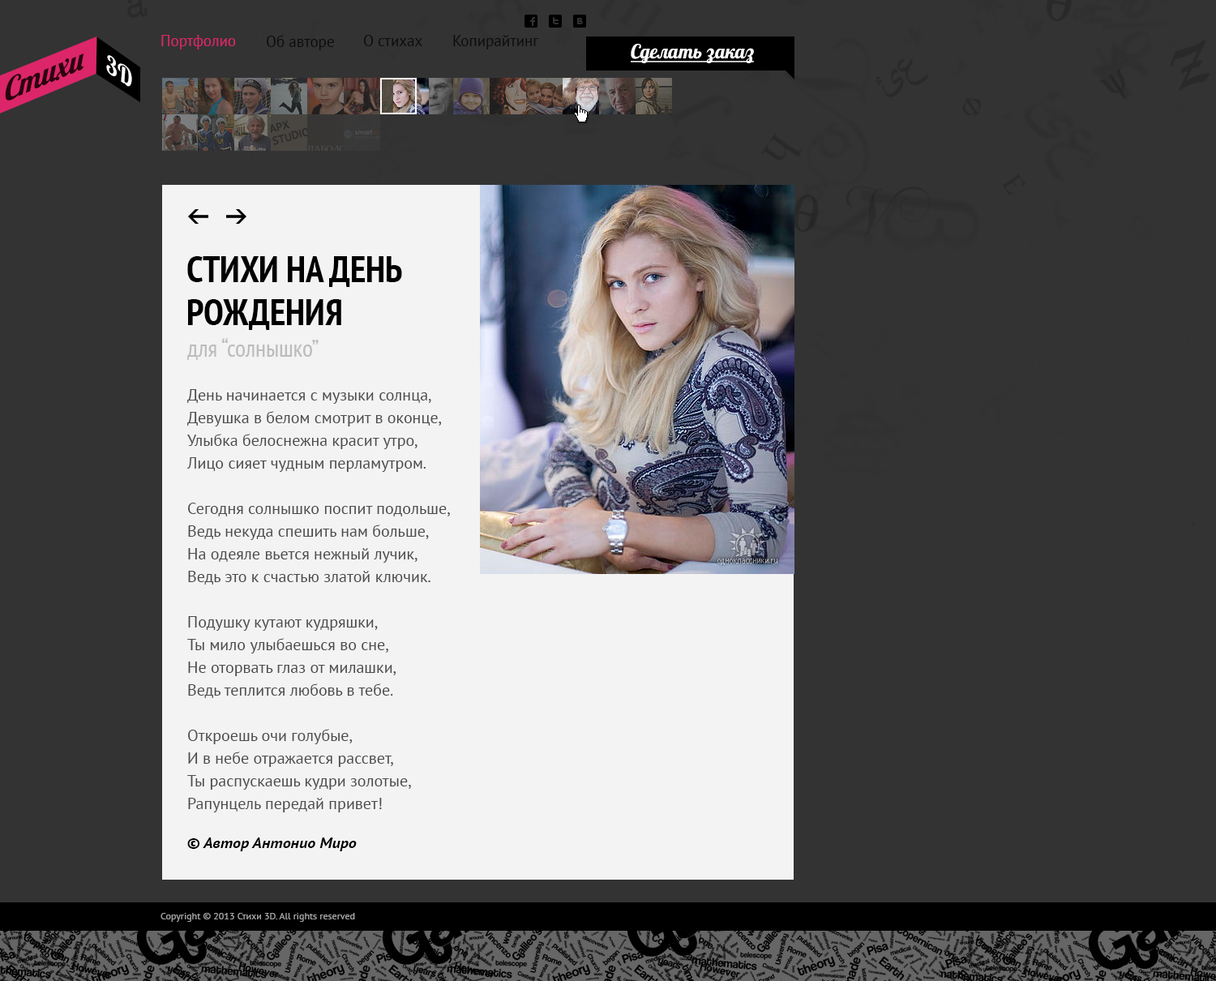
<style>
.page{position:relative;width:1216px;height:981px;background:#333333}
.page>*{position:absolute;margin:0}
.t1{font:15.4px "PTSans-Regular";color:#dc2669}
.t2{font:15.4px "PTSans-Regular";color:#000000}
.t3{font:30.3px "Lobster";color:#2b030f;scale:1.09 1}
.t4{font:19.5px "Lobster";color:#ffffff;text-decoration:underline}
.t5{font:27.1px "Lobster";letter-spacing:0.05em;color:#ffffff;scale:0.94 1}
.t6{font:36.5px/43.6px "PTSans-NarrowBold";color:#000000;text-transform:uppercase}
.t7{font:24.3px "PTSans-Narrow";color:#bcbcbc}
.t8{font:16.2px/22.7px "PTSans-Regular";color:#4c4c4c}
.t9{font:14.6px "PTSans-BoldItalic";color:#000000;scale:1.11 1}
.t10{font:9.7px "PTSans-Regular";color:#a3a3a3}
</style>
<div class="page">
<p class="t1" style="left:161px;top:35px;width:75px;height:14px">Портфолио</p>
<p class="t2" style="left:267px;top:35px;width:67px;height:15px;opacity:0.77">Об авторе</p>
<p class="t2" style="left:364px;top:35px;width:58px;height:11px;opacity:0.77">О стихах</p>
<p class="t2" style="left:453px;top:35px;width:86px;height:14px;opacity:0.77">Копирайтинг</p>
<p class="t3" style="left:5px;top:53px;width:79px;height:48px;rotate:-23deg">Стихи</p>
<p class="t4" style="left:631px;top:44px;width:123px;height:19px">Сделать заказ</p>
<p class="t5" style="left:106px;top:55px;width:26px;height:32px;rotate:33deg">3D</p>
<p class="t6" style="left:187px;top:256px;width:215px;height:74px">стихи на День<br>рождения</p>
<p class="t7" style="left:187px;top:338px;width:132px;height:22px">для “солнышко”</p>
<p class="t8" style="left:187px;top:389px;width:263px;height:423px">День начинается с музыки солнца,<br>Девушка в белом смотрит в оконце,<br>Улыбка белоснежна красит утро,<br>Лицо сияет чудным перламутром.<br><br>Сегодня солнышко поспит подольше,<br>Ведь некуда спешить нам больше,<br>На одеяле вьется нежный лучик,<br>Ведь это к счастью златой ключик.<br><br>Подушку кутают кудряшки,<br>Ты мило улыбаешься во сне,<br>Не оторвать глаз от милашки,<br>Ведь теплится любовь в тебе.<br><br>Откроешь очи голубые,<br>И в небе отражается рассвет,<br>Ты распускаешь кудри золотые,<br>Рапунцель передай привет!</p>
<p class="t9" style="left:187px;top:837px;width:170px;height:14px">© Автор Антонио Миро</p>
<p class="t10" style="left:160px;top:913px;width:195px;height:9px">Copyright © 2013 Стихи 3D. All rights reserved</p>
</div>
